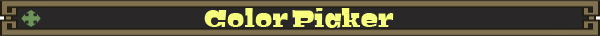
<style>
.page{position:relative;width:600px;height:36px;background:#292727}
.page>*{position:absolute;margin:0}
.t1{font:26px "Bigfish-Black";color:#f7ff7c}
</style>
<div class="page">
<p class="t1" style="left:204px;top:8px;width:190px;height:20px">Color Picker</p>
</div>
